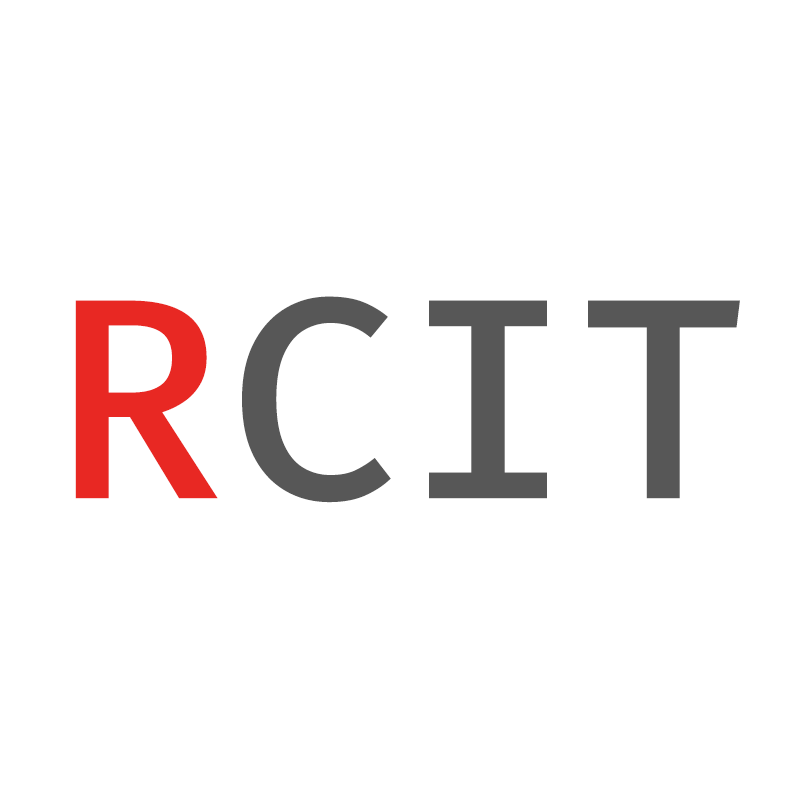
<style>
.page{position:relative;width:800px;height:800px;background:#ffffff}
.page>*{position:absolute;margin:0}
.t1{font:286.2px "FiraCode-Medium";letter-spacing:0.02em;color:#575757}
.t2{font:286.2px "FiraCode-Medium";letter-spacing:0.02em;color:#e82823}
</style>
<div class="page">
<p class="t1" style="left:75px;top:296px;width:665px;height:207px"><span class="t2">R</span>CIT</p>
</div>
